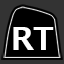
<style>
.page{position:relative;width:64px;height:64px;background:#000000}
.page>*{position:absolute;margin:0}
.t1{font:30px "Meiryo-Bold";color:#ffffff}
</style>
<div class="page">
<p class="t1" style="left:13px;top:27px;width:41px;height:23px">RT</p>
</div>
